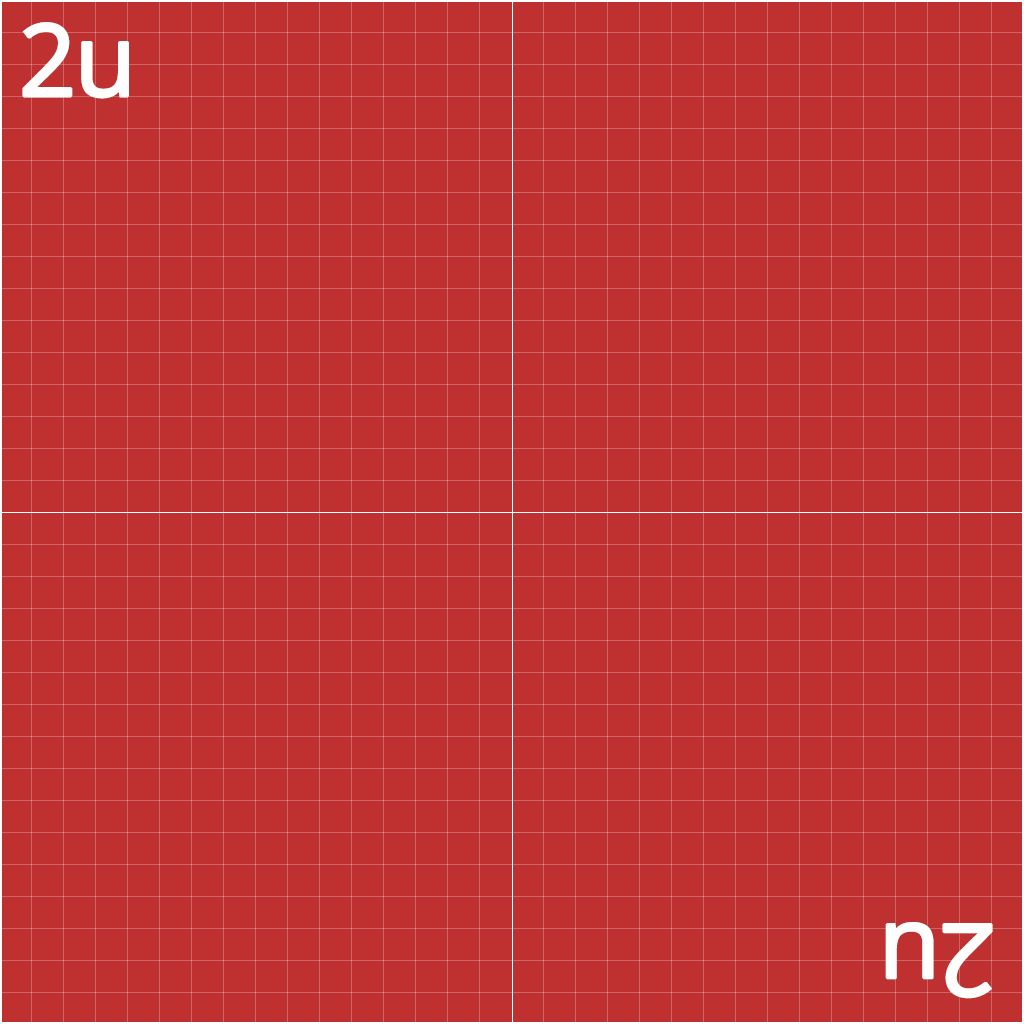
<style>
.page{position:relative;width:1024px;height:1024px;background:#bf3030}
.page>*{position:absolute;margin:0}
.t1{font:100px "OpenSans";color:#ffffff;font-weight:bold}
</style>
<div class="page">
<p class="t1" style="left:22px;top:22px;width:107px;height:77px">2u</p>
<p class="t1" style="left:885px;top:922px;width:108px;height:77px;rotate:180deg">2u</p>
</div>
